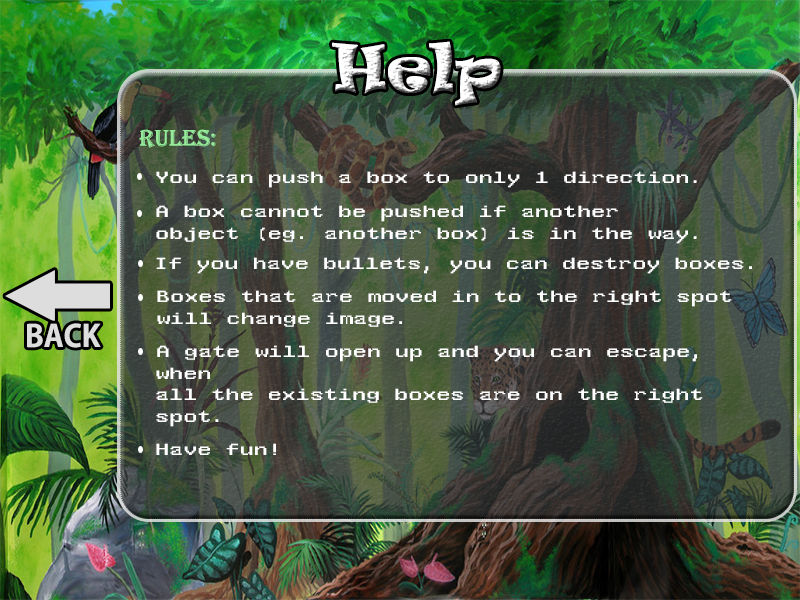
<style>
.page{position:relative;width:800px;height:600px}
.page>*{position:absolute;margin:0}
.t1{font:60px "Ravie"}
.t2{font:24px "Algerian";color:#96eb9a}
.t3{font:18px "WST_Czec";color:#ffffff}
.t4{font:30px "AdobeGothicStd-Bold";color:#dddddd}
</style>
<div class="page">
<p class="t1" style="left:332px;top:41px;width:169px;height:65px">Help</p>
<p class="t2" style="left:139px;top:129px;width:77px;height:19px">Rules:</p>
<p class="t3" style="left:156px;top:171px;width:541px;height:17px">You can push a box to only 1 direction.</p>
<p class="t3" style="left:156px;top:205px;width:541px;height:39px">A box cannot be pushed if another <br>object (eg. another box) is in the way.</p>
<p class="t3" style="left:156px;top:257px;width:596px;height:17px">If you have bullets, you can destroy boxes.</p>
<p class="t3" style="left:157px;top:290px;width:575px;height:37px">Boxes that are moved in to the right spot <br>will change image.</p>
<p class="t4" style="left:27px;top:323px;width:74px;height:25px">BACK</p>
<p class="t3" style="left:156px;top:345px;width:547px;height:82px">A gate will open up and you can escape, when<br>all the existing boxes are on the right spot.</p>
<p class="t3" style="left:156px;top:443px;width:120px;height:12px">Have fun!</p>
</div>
